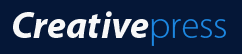
<style>
.page{position:relative;width:242px;height:54px;background:#051737}
.page>*{position:absolute;margin:0}
.t1{font:38px "MyriadPro-BoldIt";color:#f8f8f8}
.t2{font:38px "MyriadPro-Light";color:#1c87e1}
</style>
<div class="page">
<p class="t1" style="left:13px;top:11px;width:213px;height:35px">Creative<span class="t2">press</span></p>
</div>
